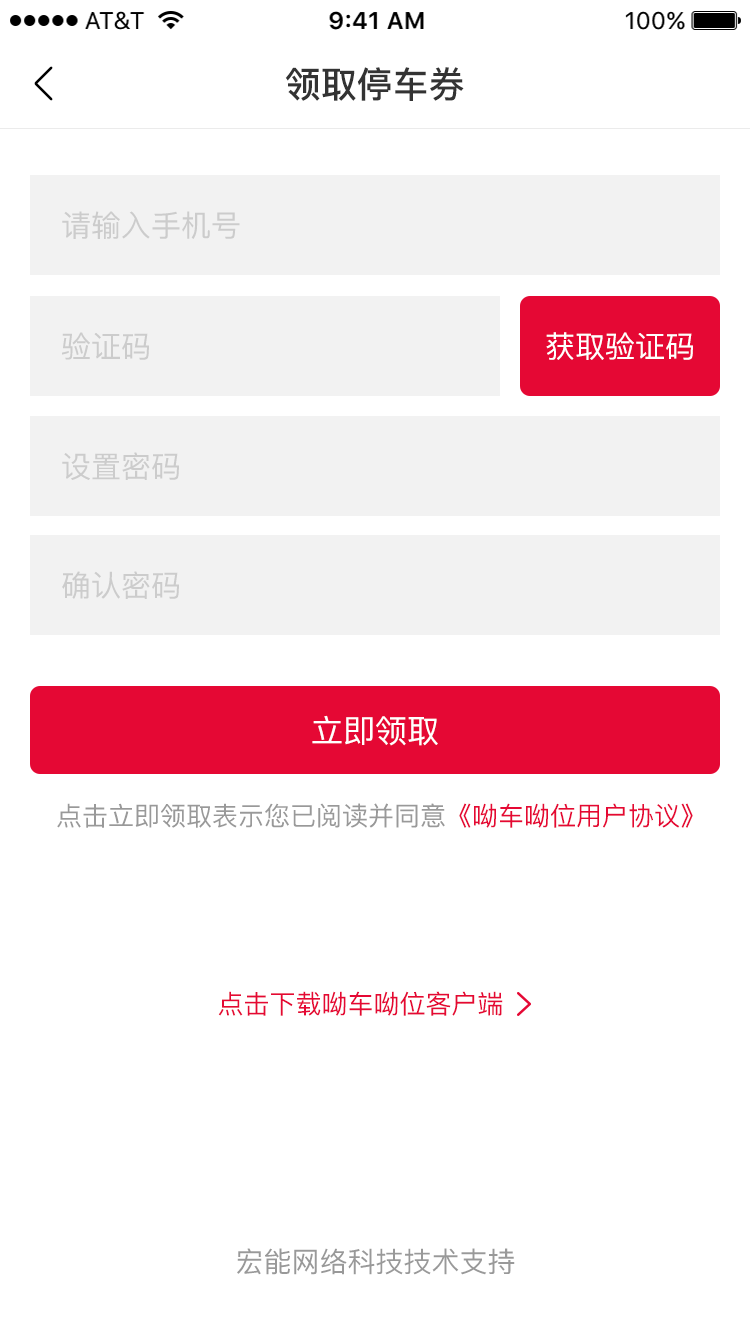
<style>
.page{position:relative;width:750px;height:1334px;background:#ffffff}
.page>*{position:absolute;margin:0}
.t1{font:36px "PingFang-SC-Bold";color:#333333}
.t2{font:30px "PingFang-SC-Medium";color:#cccccc}
.t3{font:30px "PingFang-SC-Medium";color:#ffffff}
.t4{font:32px "PingFang-SC-Medium";color:#ffffff}
.t5{font:26px "PingFang-SC-Medium";color:#999999}
.t6{font:26px "PingFang-SC-Medium";color:#e50834}
.t7{font:28px "PingFang-SC-Medium";color:#999999}
</style>
<div class="page">
<p class="t1" style="left:285px;top:67px;width:179px;height:34px">领取停车券</p>
<p class="t2" style="left:62px;top:211px;width:178px;height:28px">请输入手机号</p>
<p class="t2" style="left:62px;top:332px;width:87px;height:28px">验证码</p>
<p class="t3" style="left:546px;top:332px;width:147px;height:28px">获取验证码</p>
<p class="t2" style="left:62px;top:452px;width:117px;height:28px">设置密码</p>
<p class="t2" style="left:62px;top:571px;width:117px;height:28px">确认密码</p>
<p class="t4" style="left:312px;top:715px;width:126px;height:31px">立即领取</p>
<p class="t5" style="left:57px;top:803px;width:636px;height:25px">点击立即领取表示您已阅读并同意<span class="t6">《呦车呦位用户协议》</span></p>
<p class="t6" style="left:218px;top:991px;width:285px;height:25px">点击下载呦车呦位客户端</p>
<p class="t7" style="left:237px;top:1248px;width:278px;height:27px">宏能网络科技技术支持</p>
</div>
